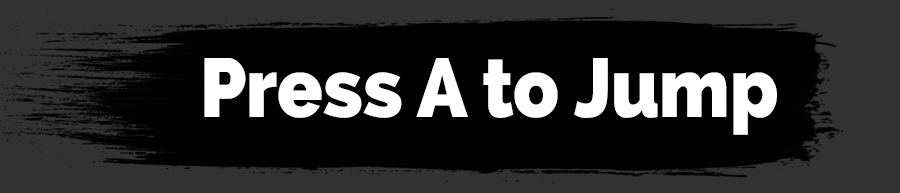
<style>
.page{position:relative;width:900px;height:193px;background:#010101}
.page>*{position:absolute;margin:0}
.t1{font:83.3px "Raleway-Heavy";color:#ffffff;scale:0.9 1}
</style>
<div class="page">
<p class="t1" style="left:204px;top:58px;width:573px;height:77px">Press A to Jump</p>
</div>
